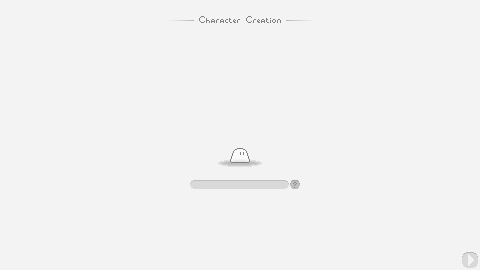
<style>
.page{position:relative;width:480px;height:270px;background:#f3f3f3}
.page>*{position:absolute;margin:0}
.t1{font:14.7px "Indicity";color:#808080}
.t2{font:14.7px "Indicity";color:#8c8c8c}
</style>
<div class="page">
<p class="t1" style="left:199px;top:16px;width:82px;height:7px">Character Creation</p>
<p class="t2" style="left:293px;top:182px;width:4px;height:6px">?</p>
</div>
